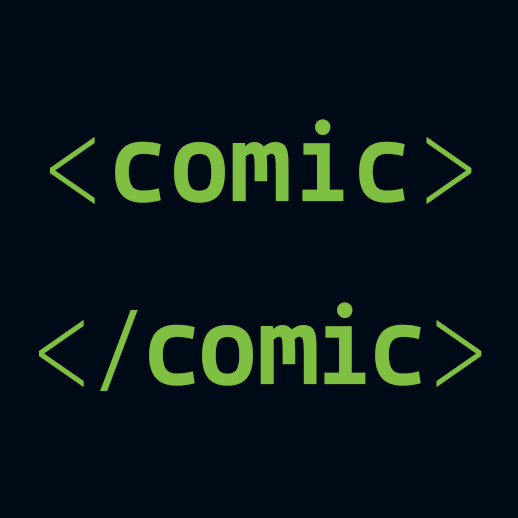
<style>
.page{position:relative;width:518px;height:518px;background:#000a17}
.page>*{position:absolute;margin:0}
.t1{font:122px/183px "Lekton-Bold";color:#7fbf42}
.t2{font:122px/183px "SourceCodePro-Light";color:#7fbf42}
.t3{font:122px/183px "SourceCodePro-Light";letter-spacing:-0.05em;color:#7fbf42}
.t4{font:93px/183px "SourceCodePro-Regular";letter-spacing:-0.05em;color:#7fbf42}
.t5{font:122px/183px "Lekton-Bold";letter-spacing:-0.05em;color:#7fbf42}
</style>
<div class="page">
<p class="t1" style="left:39px;top:119px;width:443px;height:272px;text-align:center"><span class="t2">&lt;</span>comic<span class="t2">&gt;<br></span><span class="t3">&lt;</span><span class="t4">/</span><span class="t5">c</span>o<span class="t5">mic</span><span class="t3">&gt;</span></p>
</div>
